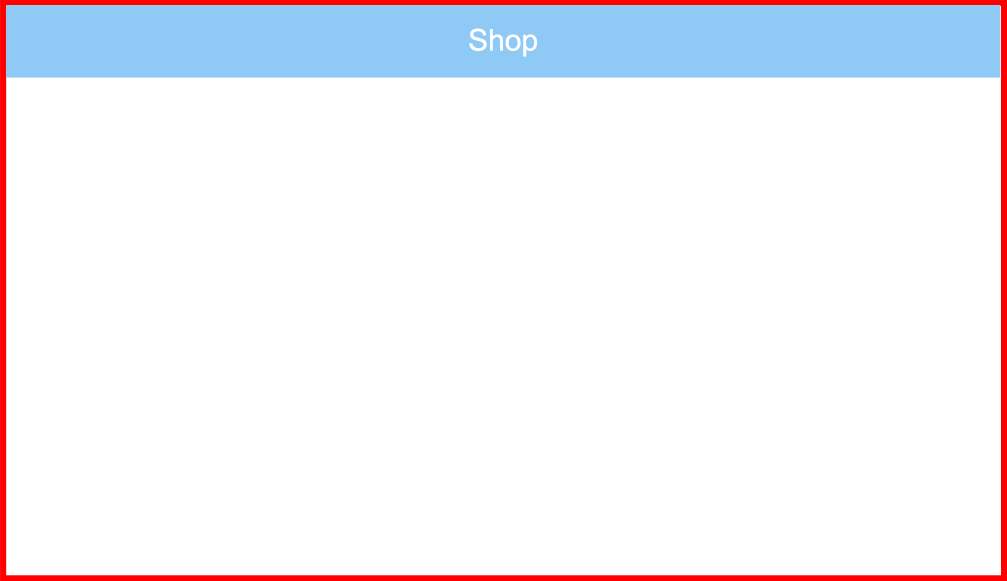
<style>
.page{position:relative;width:1007px;height:581px;background:#ffffff}
.page>*{position:absolute;margin:0}
.t1{font:30px "ArialMT";color:#ffffff}
</style>
<div class="page">
<p class="t1" style="left:469px;top:28px;width:68px;height:29px">Shop</p>
</div>
